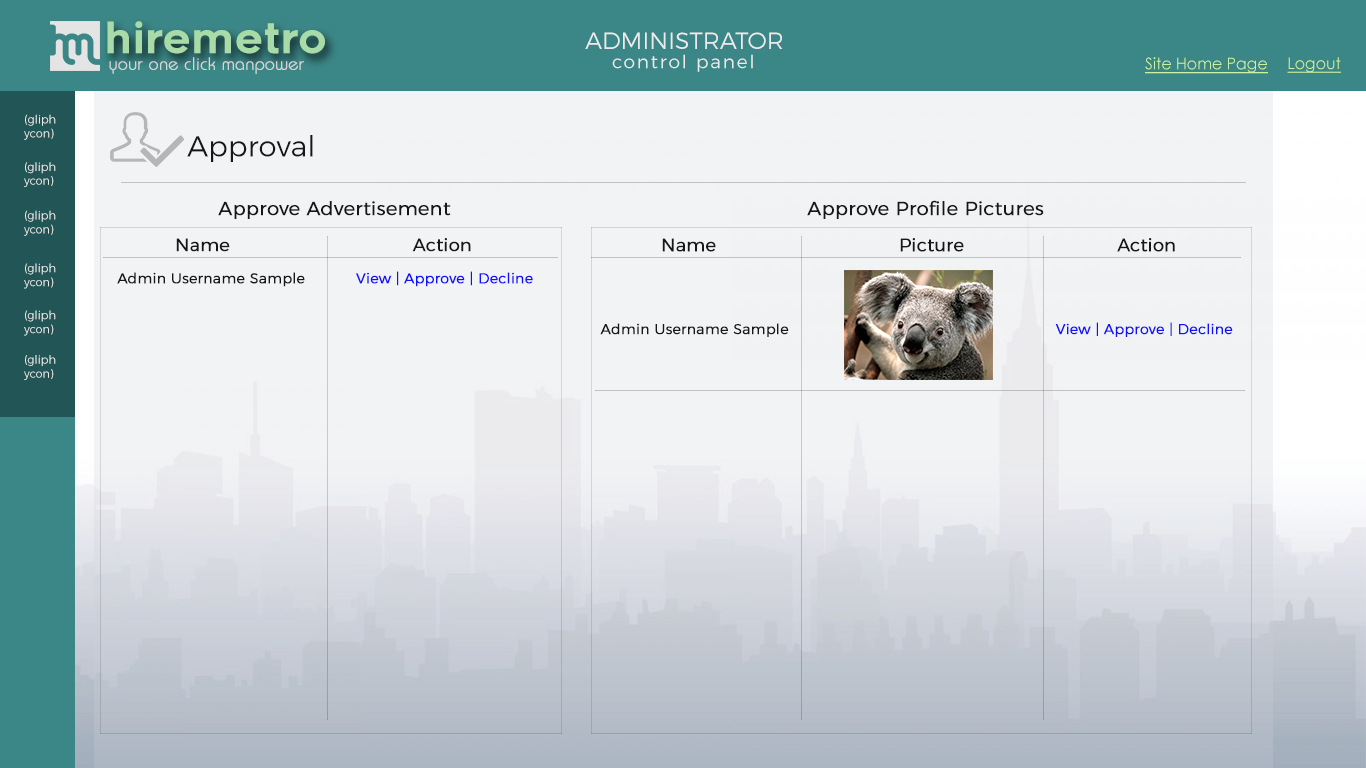
<style>
.page{position:relative;width:1366px;height:768px;background:#f2f3f5}
.page>*{position:absolute;margin:0}
.t1{font:42.1px "Renogare-Regular";color:#a8dba8}
.t2{font:23.6px "Montserrat-Light";color:#ebebeb}
.t3{font:18.4px "Montserrat-Light";letter-spacing:0.1em;color:#ebebeb}
.t4{font:17.5px "Brie-Light";color:#d5d5d5;font-weight:bold}
.t5{font:16.1px "CenturyGothic";color:#cff09e;text-decoration:underline}
.t6{font:11.5px "Montserrat-Light";color:#ebebeb}
.t7{font:28.9px "Montserrat-Light";color:#171717}
.t8{font:19px "Montserrat-Light";color:#171717;font-weight:bold}
.t9{font:17.8px "Montserrat-Light";color:#171717;font-weight:bold}
.t10{font:18.1px "Montserrat-Light";color:#171717;font-weight:bold}
.t11{font:14.5px "Montserrat-Light";color:#1111fe;font-weight:bold}
.t12{font:14.5px "Montserrat-Light";color:#171717;font-weight:bold}
.t13{font:14.1px "Montserrat-Light";color:#1111fe;font-weight:bold}
.t14{font:14.1px "Montserrat-Light";color:#171717;font-weight:bold}
</style>
<div class="page">
<p class="t1" style="left:107px;top:21px;width:218px;height:33px">hiremetro</p>
<p class="t2" style="left:585px;top:32px;width:198px;height:17px">ADMINISTRATOR</p>
<p class="t3" style="left:612px;top:54px;width:141px;height:18px">control panel</p>
<p class="t4" style="left:109px;top:57px;width:195px;height:17px">your one click manpower</p>
<p class="t5" style="left:1145px;top:57px;width:123px;height:17px">Site Home Page</p>
<p class="t5" style="left:1287px;top:57px;width:54px;height:16px">Logout</p>
<p class="t6" style="left:24px;top:114px;width:32px;height:26px">(gliph<br>ycon)</p>
<p class="t7" style="left:187px;top:135px;width:126px;height:27px">Approval</p>
<p class="t6" style="left:24px;top:162px;width:32px;height:25px">(gliph<br>ycon)</p>
<p class="t8" style="left:218px;top:201px;width:233px;height:18px">Approve Advertisement</p>
<p class="t8" style="left:807px;top:200px;width:237px;height:19px">Approve Profile Pictures</p>
<p class="t6" style="left:24px;top:210px;width:32px;height:26px">(gliph<br>ycon)</p>
<p class="t9" style="left:176px;top:238px;width:54px;height:14px">Name</p>
<p class="t9" style="left:412px;top:238px;width:59px;height:14px">Action</p>
<p class="t10" style="left:662px;top:238px;width:54px;height:14px">Name</p>
<p class="t10" style="left:900px;top:238px;width:64px;height:14px">Picture</p>
<p class="t10" style="left:1117px;top:238px;width:58px;height:14px">Action</p>
<p class="t6" style="left:24px;top:263px;width:32px;height:26px">(gliph<br>ycon)</p>
<p class="t11" style="left:117px;top:271px;width:416px;height:16px"><span class="t12">Admin Username Sample      </span>View | Approve | Decline</p>
<p class="t6" style="left:24px;top:310px;width:32px;height:26px">(gliph<br>ycon)</p>
<p class="t13" style="left:600px;top:322px;width:633px;height:15px"><span class="t14">Admin Username Sample            </span>View | Approve | Decline</p>
<p class="t6" style="left:24px;top:355px;width:32px;height:25px">(gliph<br>ycon)</p>
</div>
